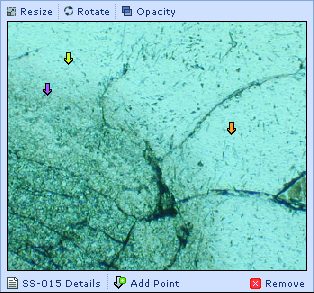
<style>
.page{position:relative;width:314px;height:293px}
.page>*{position:absolute;margin:0}
.t1{font:9px "Verdana";color:#15317d}
</style>
<div class="page">
<p class="t1" style="left:21px;top:8px;width:31px;height:7px">Resize</p>
<p class="t1" style="left:78px;top:8px;width:31px;height:7px">Rotate</p>
<p class="t1" style="left:137px;top:8px;width:38px;height:9px">Opacity</p>
<p class="t1" style="left:23px;top:279px;width:77px;height:8px">SS-015 Details</p>
<p class="t1" style="left:131px;top:279px;width:48px;height:8px">Add Point</p>
<p class="t1" style="left:266px;top:280px;width:38px;height:7px">Remove</p>
</div>
